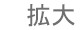
<style>
.page{position:relative;width:80px;height:30px;background:#ffffff}
.page>*{position:absolute;margin:0}
.t1{font:25px "MS-PGothic";color:#6f6f6f}
</style>
<div class="page">
<p class="t1" style="left:27px;top:4px;width:48px;height:23px">拡大</p>
</div>
